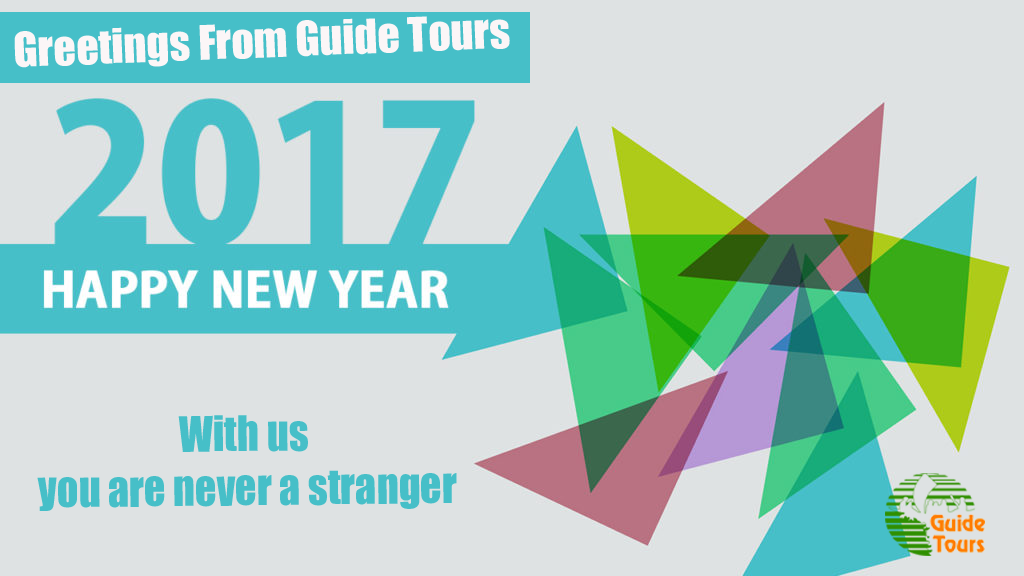
<style>
.page{position:relative;width:1024px;height:576px;background:#dee2e3}
.page>*{position:absolute;margin:0}
.t1{font:44px "Impact";color:#fbf6f7}
.t2{font:45.2px "Impact";color:#46bfc8;scale:0.93 1}
</style>
<div class="page">
<p class="t1" style="left:14px;top:16px;width:496px;height:52px;rotate:-2deg">Greetings From Guide Tours</p>
<p class="t2" style="left:37px;top:415px;width:420px;height:96px;text-align:center;rotate:-1deg">With us <br>you are never a stranger</p>
</div>
